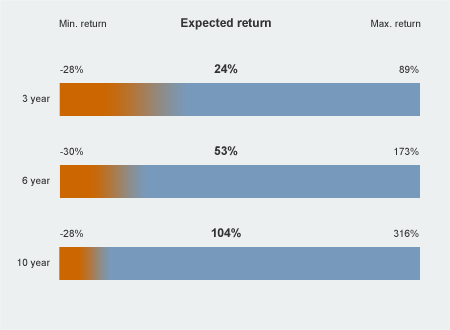
<style>
.page{position:relative;width:450px;height:330px;background:#ecf0f1}
.page>*{position:absolute;margin:0}
.t1{font:10px "ArialMT";color:#333333}
.t2{font:12px "Arial-BoldMT";color:#333333}
</style>
<div class="page">
<p class="t1" style="left:59px;top:19px;width:47px;height:8px">Min. return</p>
<p class="t2" style="left:181px;top:18px;width:90px;height:12px">Expected return</p>
<p class="t1" style="left:371px;top:19px;width:50px;height:8px">Max. return</p>
<p class="t1" style="left:60px;top:65px;width:23px;height:8px">-28%</p>
<p class="t2" style="left:214px;top:64px;width:24px;height:10px">24%</p>
<p class="t1" style="left:399px;top:65px;width:20px;height:8px">89%</p>
<p class="t1" style="left:22px;top:94px;width:28px;height:10px">3 year</p>
<p class="t1" style="left:60px;top:147px;width:23px;height:8px">-30%</p>
<p class="t2" style="left:214px;top:146px;width:24px;height:10px">53%</p>
<p class="t1" style="left:394px;top:147px;width:25px;height:8px">173%</p>
<p class="t1" style="left:22px;top:176px;width:28px;height:10px">6 year</p>
<p class="t1" style="left:60px;top:229px;width:23px;height:8px">-28%</p>
<p class="t2" style="left:211px;top:228px;width:30px;height:10px">104%</p>
<p class="t1" style="left:394px;top:229px;width:25px;height:8px">316%</p>
<p class="t1" style="left:17px;top:258px;width:33px;height:10px">10 year</p>
</div>
